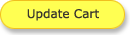
<style>
.page{position:relative;width:130px;height:35px;background:#ffff52}
.page>*{position:absolute;margin:0}
.t1{font:12px "Verdana";color:#39362e}
</style>
<div class="page">
<p class="t1" style="left:27px;top:8px;width:72px;height:13px">Update Cart</p>
</div>
